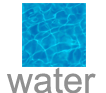
<style>
.page{position:relative;width:106px;height:93px;background:#ffffff}
.page>*{position:absolute;margin:0}
.t1{font:36px "ArialMT";color:#909090}
</style>
<div class="page">
<p class="t1" style="left:7px;top:67px;width:89px;height:27px">water</p>
</div>
